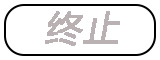
<style>
.page{position:relative;width:160px;height:60px;background:#ffffff}
.page>*{position:absolute;margin:0}
.t1{font:36px "MicrosoftYaHei";color:#bab2b2;font-weight:bold;font-style:italic}
</style>
<div class="page">
<p class="t1" style="left:45px;top:11px;width:75px;height:35px">终止</p>
</div>
